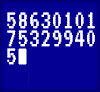
<style>
.page{position:relative;width:100px;height:92px;background:#030092}
.page>*{position:absolute;margin:0}
.t1{font:27px/18px "VT323-Regular";letter-spacing:0.005em;color:#ffffff}
</style>
<div class="page">
<p class="t1" style="left:7px;top:12px;width:88px;height:53px">58630101<br>75329940<br>5</p>
</div>
